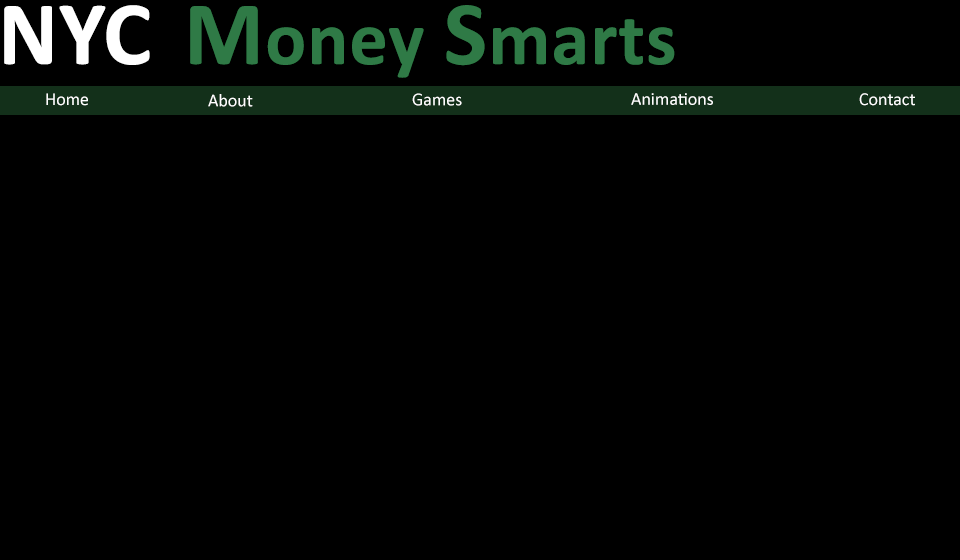
<style>
.page{position:relative;width:960px;height:560px;background:#000000}
.page>*{position:absolute;margin:0}
.t1{font:91.4px "Calibri-Bold";letter-spacing:0.005em;color:#ffffff}
.t2{font:76.2px "Calibri-Bold";letter-spacing:0.015em;color:#2f7a46}
.t3{font:91.4px "Calibri-Bold";letter-spacing:0.015em;color:#2f7a46}
.t4{font:18px "Calibri";color:#ffffff}
</style>
<div class="page">
<p class="t1" style="left:4px;top:5px;width:146px;height:60px">NYC</p>
<p class="t2" style="left:190px;top:5px;width:485px;height:73px"><span class="t3">M</span>oney <span class="t3">S</span>marts</p>
<p class="t4" style="left:46px;top:93px;width:42px;height:13px">Home</p>
<p class="t4" style="left:208px;top:94px;width:45px;height:13px">About</p>
<p class="t4" style="left:412px;top:93px;width:50px;height:13px">Games</p>
<p class="t4" style="left:631px;top:93px;width:82px;height:12px">Animations</p>
<p class="t4" style="left:859px;top:93px;width:56px;height:13px">Contact</p>
</div>
